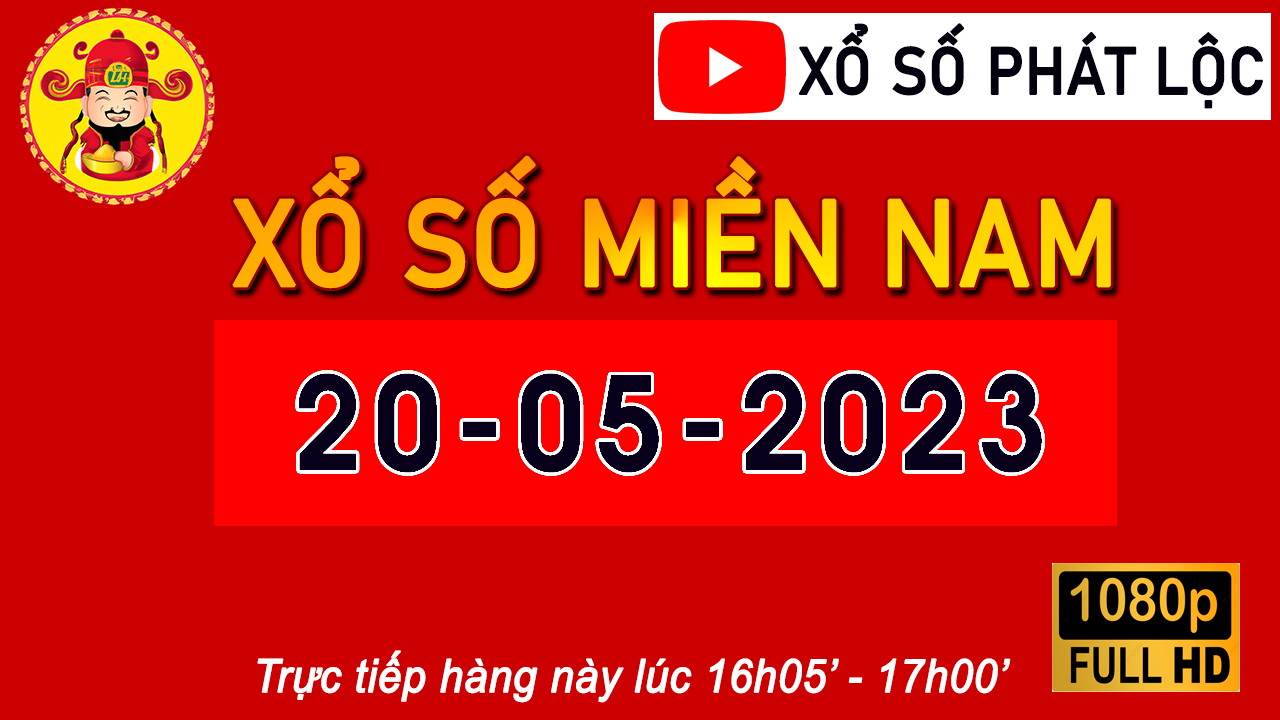
<style>
.page{position:relative;width:1280px;height:720px;background:#cc0000}
.page>*{position:absolute;margin:0}
.t1{font:65.4px "Bahnschrift";color:#04000d;text-transform:uppercase;font-weight:bold;scale:0.92 1}
.t2{font:119.9px "Bahnschrift";text-transform:uppercase;font-weight:bold;scale:0.92 1}
.t3{font:45.8px "Arial-ItalicMT";color:#ffffff;font-weight:bold;scale:0.92 1}
</style>
<div class="page">
<p class="t1" style="left:798px;top:23px;width:465px;height:86px">Xổ số phát lộc</p>
<p class="t2" style="left:232px;top:155px;width:879px;height:134px">xổ số miền nam</p>
<p class="t3" style="left:257px;top:650px;width:754px;height:53px">Trực tiếp hàng này lúc 16h05’ - 17h00’</p>
</div>
